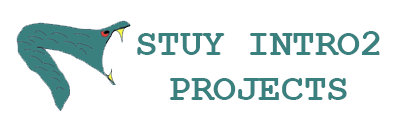
<style>
.page{position:relative;width:400px;height:138px;background:#ffffff}
.page>*{position:absolute;margin:0}
.t1{font:37.5px "CourierNewPS-BoldMT";color:#3a807f}
</style>
<div class="page">
<p class="t1" style="left:137px;top:31px;width:243px;height:69px;text-align:center">STUY INTRO2<br>PROJECTS</p>
</div>
